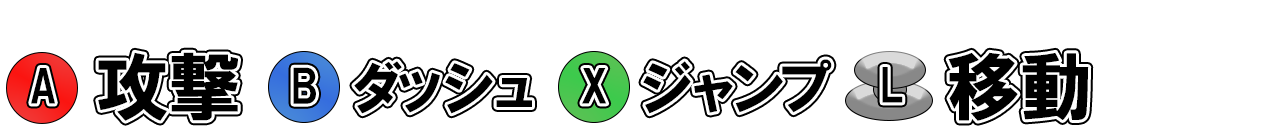
<style>
.page{position:relative;width:1280px;height:128px;background:#ffffff}
.page>*{position:absolute;margin:0}
.t1{font:73.7px "HGSSoeiKakugothicUB";color:#000000}
.t2{font:59px "HGSSoeiKakugothicUB";letter-spacing:-0.22em;color:#000000}
.t3{font:44.2px "HGSSoeiKakugothicUB";color:#000000}
</style>
<div class="page">
<p class="t1" style="left:98px;top:52px;width:140px;height:69px">攻撃</p>
<p class="t1" style="left:948px;top:52px;width:141px;height:69px">移動</p>
<p class="t2" style="left:354px;top:61px;width:178px;height:53px">ダッシュ</p>
<p class="t2" style="left:643px;top:59px;width:189px;height:55px">ジャンプ</p>
<p class="t3" style="left:31px;top:68px;width:24px;height:36px">A</p>
<p class="t3" style="left:293px;top:67px;width:23px;height:37px">B</p>
<p class="t3" style="left:582px;top:68px;width:25px;height:36px">X</p>
<p class="t3" style="left:882px;top:67px;width:21px;height:36px">L</p>
</div>
